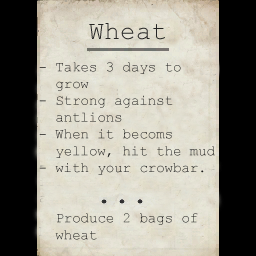
<style>
.page{position:relative;width:256px;height:256px;background:#000000}
.page>*{position:absolute;margin:0}
.t1{font:26px "CourierNewPSMT";color:#252524}
.t2{font:14px "CourierNewPSMT";color:#1c1c1b}
</style>
<div class="page">
<p class="t1" style="left:89px;top:23px;width:76px;height:17px">Wheat</p>
<p class="t2" style="left:39px;top:62px;width:176px;height:178px">- Takes 3 days to    grow<br>- Strong against <br>  antlions<br>- When it becoms <br>  yellow, hit the mud<br>- with your crowbar.<br><br><br>  Produce 2 bags of<br>  wheat</p>
</div>
